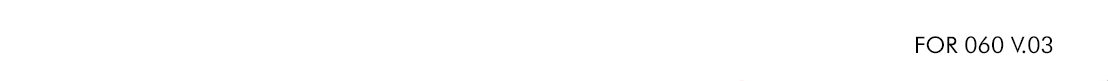
<style>
.page{position:relative;width:1108px;height:81px;background:#ffffff}
.page>*{position:absolute;margin:0}
.t1{font:22.9px "FuturaBT-Book";color:#000000}
</style>
<div class="page">
<p class="t1" style="left:916px;top:36px;width:137px;height:18px">FOR 060 V.03</p>
</div>
